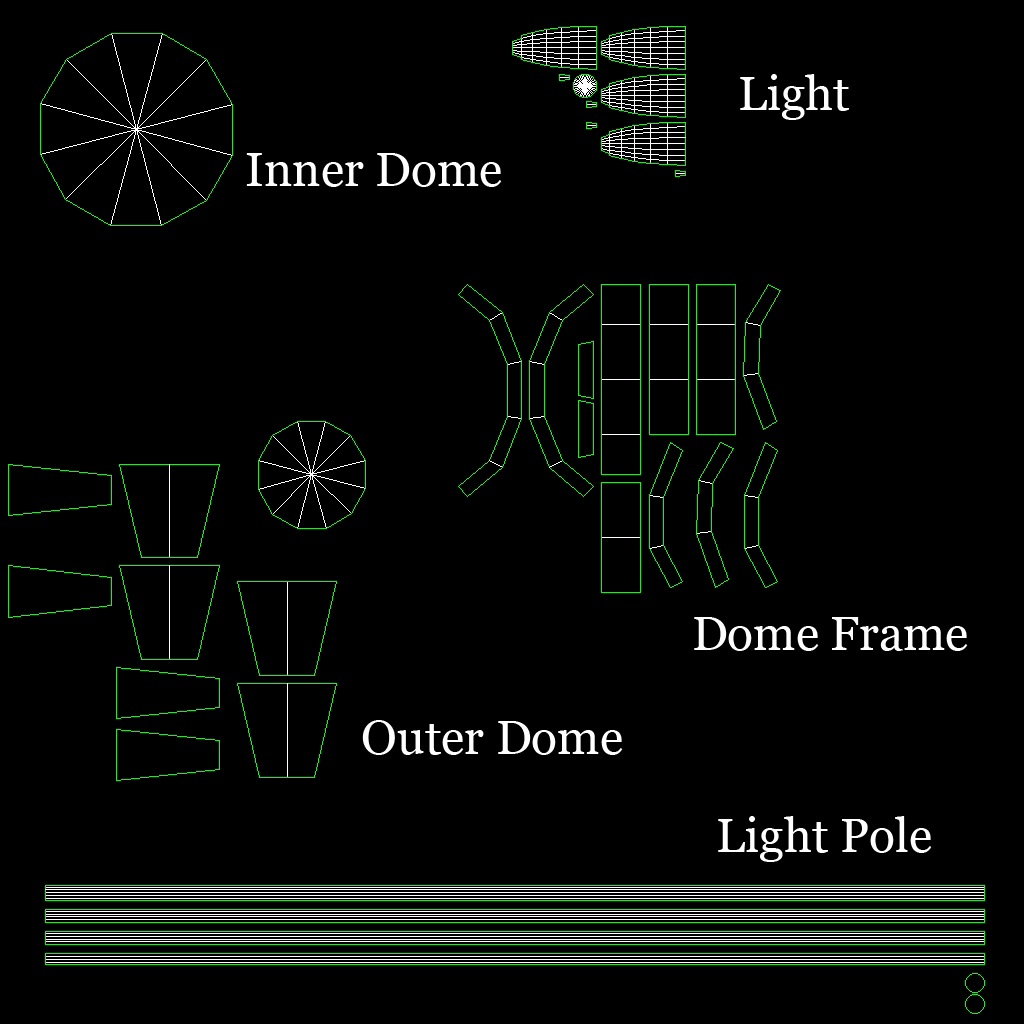
<style>
.page{position:relative;width:1024px;height:1024px;background:#000000}
.page>*{position:absolute;margin:0}
.t1{font:48px "Georgia";color:#ffffff}
</style>
<div class="page">
<p class="t1" style="left:740px;top:74px;width:109px;height:46px">Light</p>
<p class="t1" style="left:246px;top:153px;width:256px;height:34px">Inner Dome</p>
<p class="t1" style="left:694px;top:617px;width:274px;height:34px">Dome Frame</p>
<p class="t1" style="left:362px;top:720px;width:261px;height:35px">Outer Dome</p>
<p class="t1" style="left:718px;top:816px;width:214px;height:46px">Light Pole</p>
</div>
